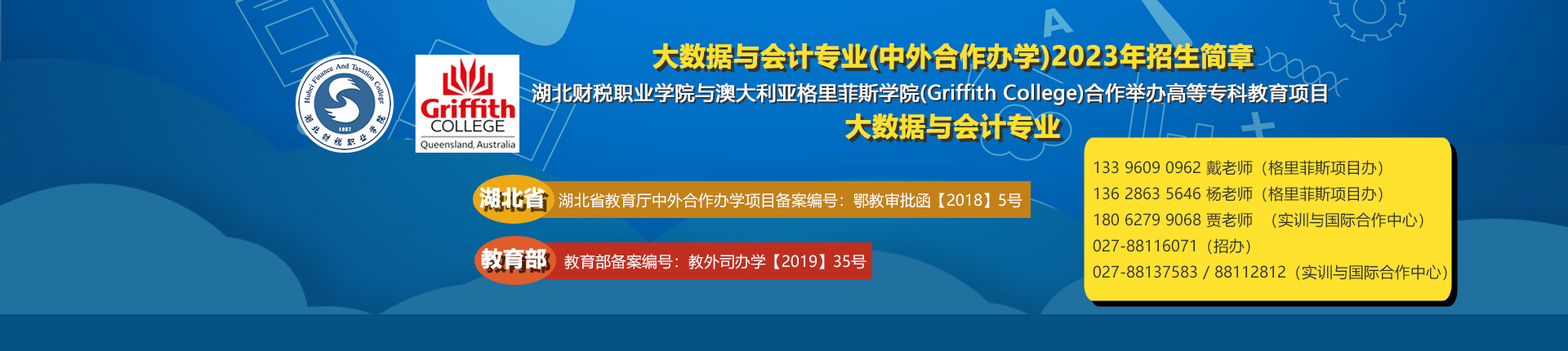
<style>
.page{position:relative;width:1568px;height:351px}
.page>*{position:absolute;margin:0}
.t1{font:26.1px "MicrosoftYaHei-Bold";color:#fee12d;font-weight:bold}
.t2{font:19.6px "MicrosoftYaHei";color:#ffffff;font-weight:bold}
.t3{font:15.3px/26.1px "MicrosoftYaHei";color:#333333}
.t4{font:21.2px "MicrosoftYaHei-Bold";color:#ffffff;font-weight:bold}
.t5{font:15.3px "MicrosoftYaHei";color:#ffffff}
</style>
<div class="page">
<p class="t1" style="left:653px;top:42px;width:601px;height:28px">大数据与会计专业(中外合作办学)2023年招生简章</p>
<p class="t2" style="left:532px;top:82px;width:795px;height:23px">湖北财税职业学院与澳大利亚格里菲斯学院(Griffith College)合作举办高等专科教育项目</p>
<p class="t1" style="left:845px;top:114px;width:215px;height:26px">大数据与会计专业</p>
<p class="t3" style="left:1093px;top:160px;width:354px;height:121px">133 9609 0962 戴老师（格里菲斯项目办）<br>136 2863 5646 杨老师（格里菲斯项目办）<br>180 6279 9068 贾老师  （实训与国际合作中心）<br>027-88116071（招办）<br>027-88137583 / 88112812（实训与国际合作中心）</p>
<p class="t4" style="left:479px;top:187px;width:66px;height:21px">湖北省</p>
<p class="t5" style="left:559px;top:193px;width:463px;height:15px">湖北省教育厅中外合作办学项目备案编号：鄂教审批函【2018】5号</p>
<p class="t4" style="left:481px;top:248px;width:65px;height:22px">教育部</p>
<p class="t5" style="left:564px;top:254px;width:302px;height:16px">教育部备案编号：教外司办学【2019】35号</p>
</div>
